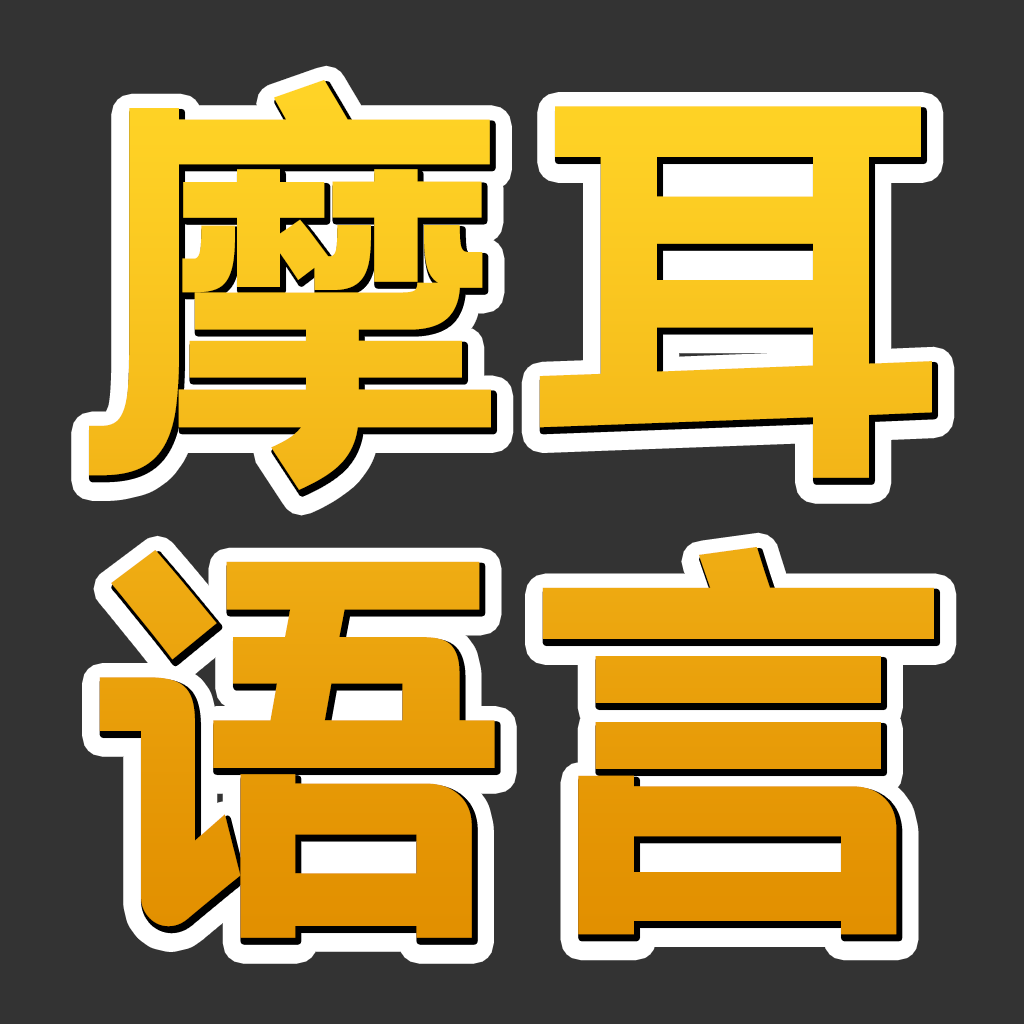
<style>
.page{position:relative;width:1024px;height:1024px;background:#333333}
.page>*{position:absolute;margin:0}
.t1{font:440px/460px "HelloFont-WenYiHei"}
</style>
<div class="page">
<p class="t1" style="left:89px;top:80px;width:845px;height:858px">摩耳<br>语言</p>
<p class="t1" style="left:91px;top:85px;width:846px;height:859px">摩耳<br>语言</p>
</div>
